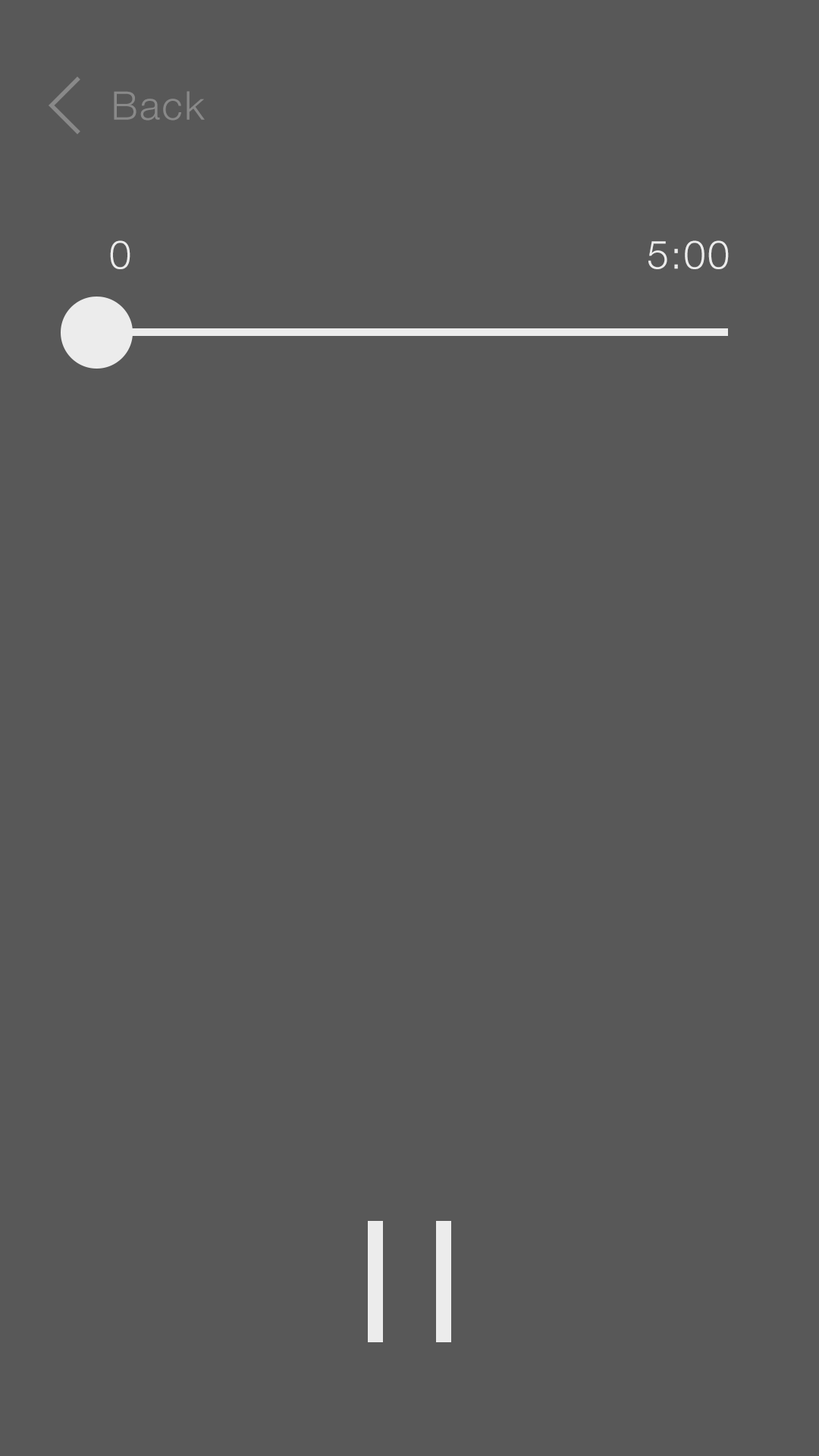
<style>
.page{position:relative;width:819px;height:1456px;background:#585858}
.page>*{position:absolute;margin:0}
.t1{font:39.4px "HelveticaNeue-Light";letter-spacing:0.05em;color:#898989}
.t2{font:39.4px "HelveticaNeue-Light";letter-spacing:0.05em;color:#ececec}
</style>
<div class="page">
<p class="t1" style="left:114px;top:91px;width:91px;height:30px">Back</p>
<p class="t2" style="left:110px;top:240px;width:20px;height:29px">0</p>
<p class="t2" style="left:648px;top:240px;width:81px;height:29px">5:00</p>
</div>
